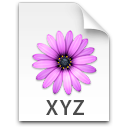
<style>
.page{position:relative;width:128px;height:128px;background:#ffffff}
.page>*{position:absolute;margin:0}
.t1{font:21.9px "MyriadPro-Semibold";letter-spacing:0.02em;color:#4b4b4b}
</style>
<div class="page">
<p class="t1" style="left:46px;top:100px;width:38px;height:15px">XYZ</p>
</div>
